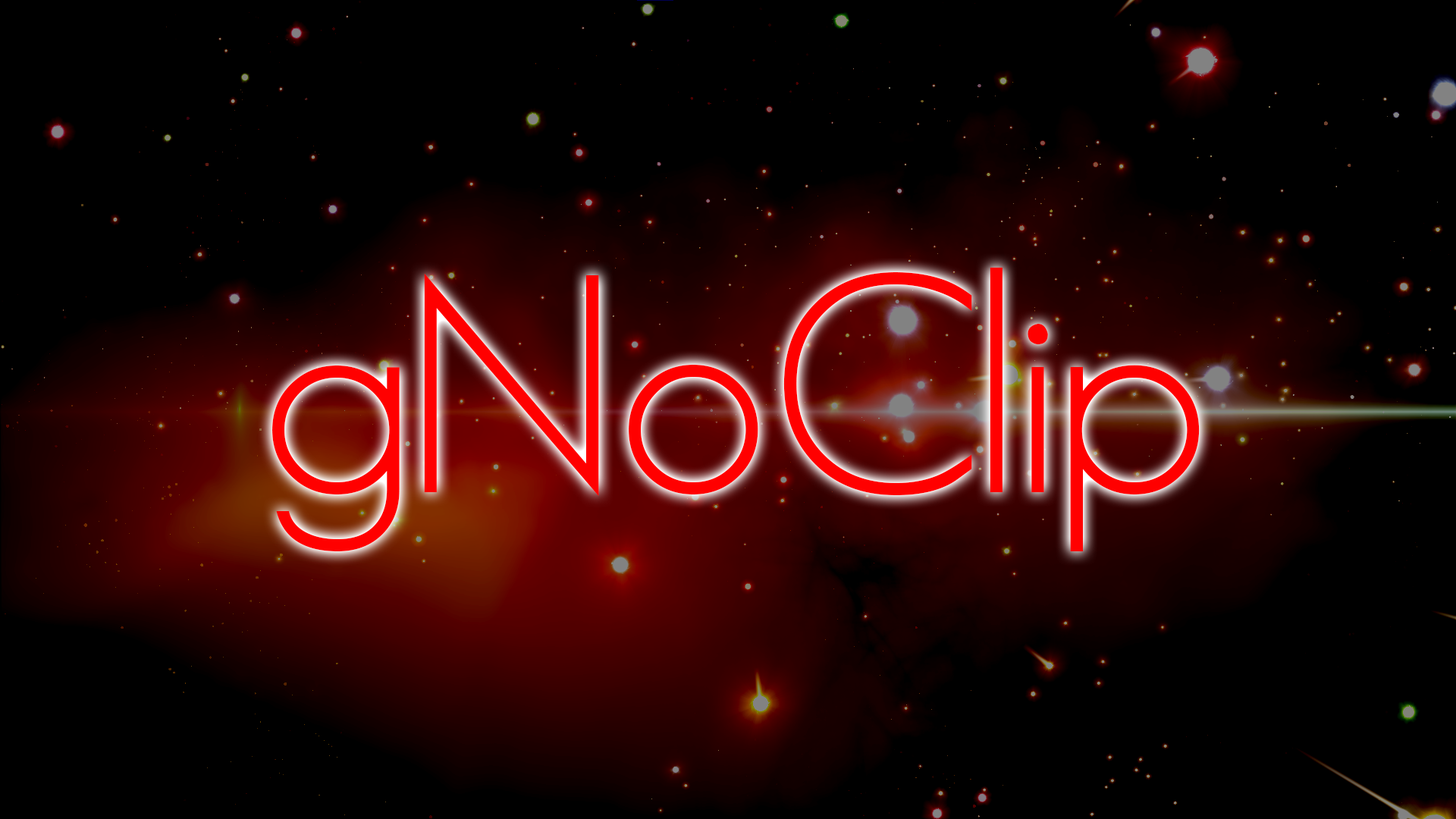
<style>
.page{position:relative;width:1456px;height:819px;background:#000000}
.page>*{position:absolute;margin:0}
.t1{font:303.3px "GeosansLight-NMS";color:#ff0000}
</style>
<div class="page">
<p class="t1" style="left:272px;top:267px;width:928px;height:284px">gNoClip</p>
</div>
